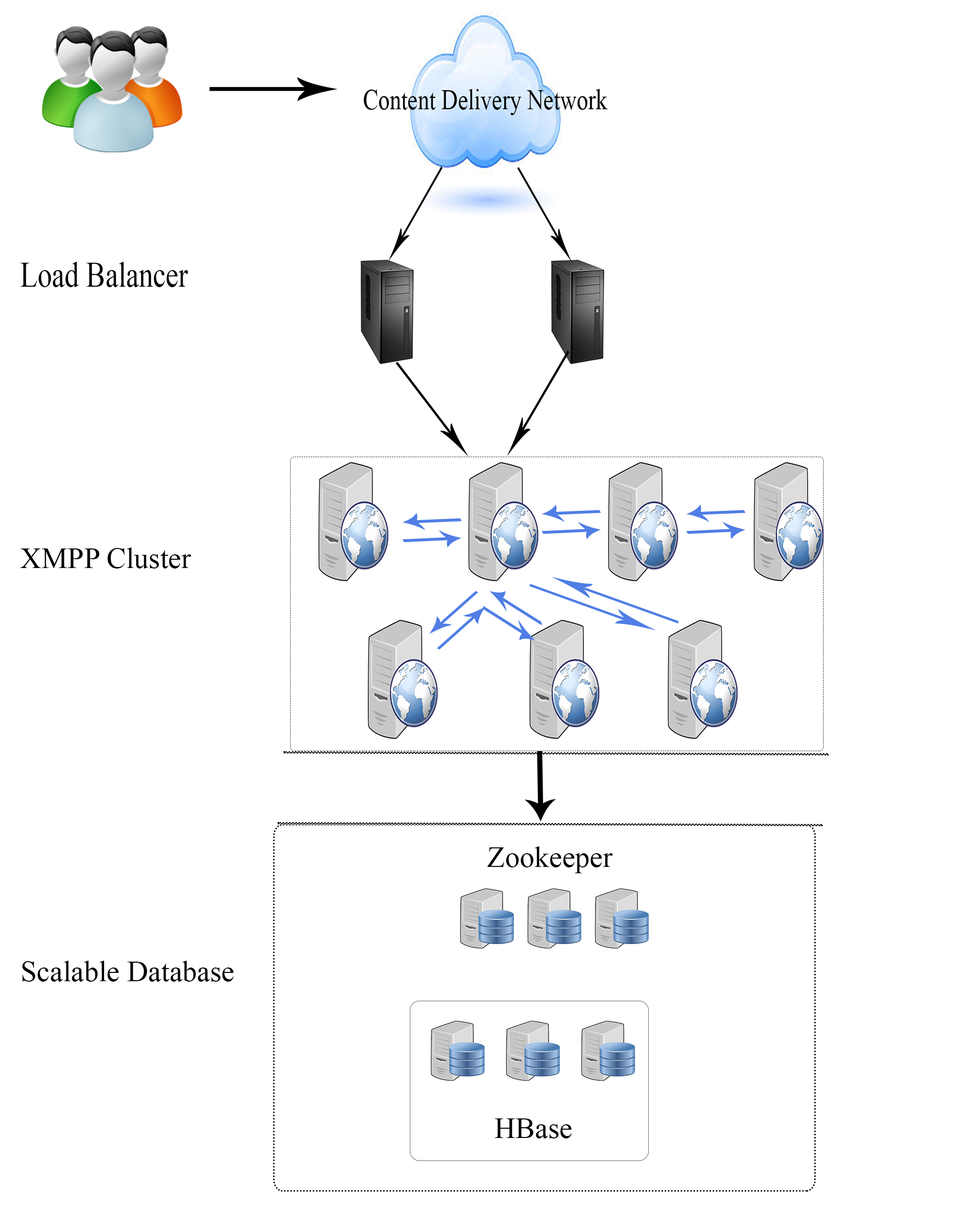
<style>
.page{position:relative;width:977px;height:1221px;background:#ffffff}
.page>*{position:absolute;margin:0}
.t1{font:35.8px "TimesNewRomanPSMT";color:#000000;scale:0.8 1}
.t2{font:29.3px "TimesNewRomanPSMT";color:#000000}
</style>
<div class="page">
<p class="t1" style="left:21px;top:262px;width:167px;height:25px">Load Balancer</p>
<p class="t2" style="left:20px;top:547px;width:171px;height:21px">XMPP Cluster</p>
<p class="t2" style="left:487px;top:846px;width:126px;height:27px">Zookeeper</p>
<p class="t2" style="left:22px;top:961px;width:211px;height:21px">Scalable Database</p>
<p class="t2" style="left:495px;top:1118px;width:76px;height:20px">HBase</p>
</div>
